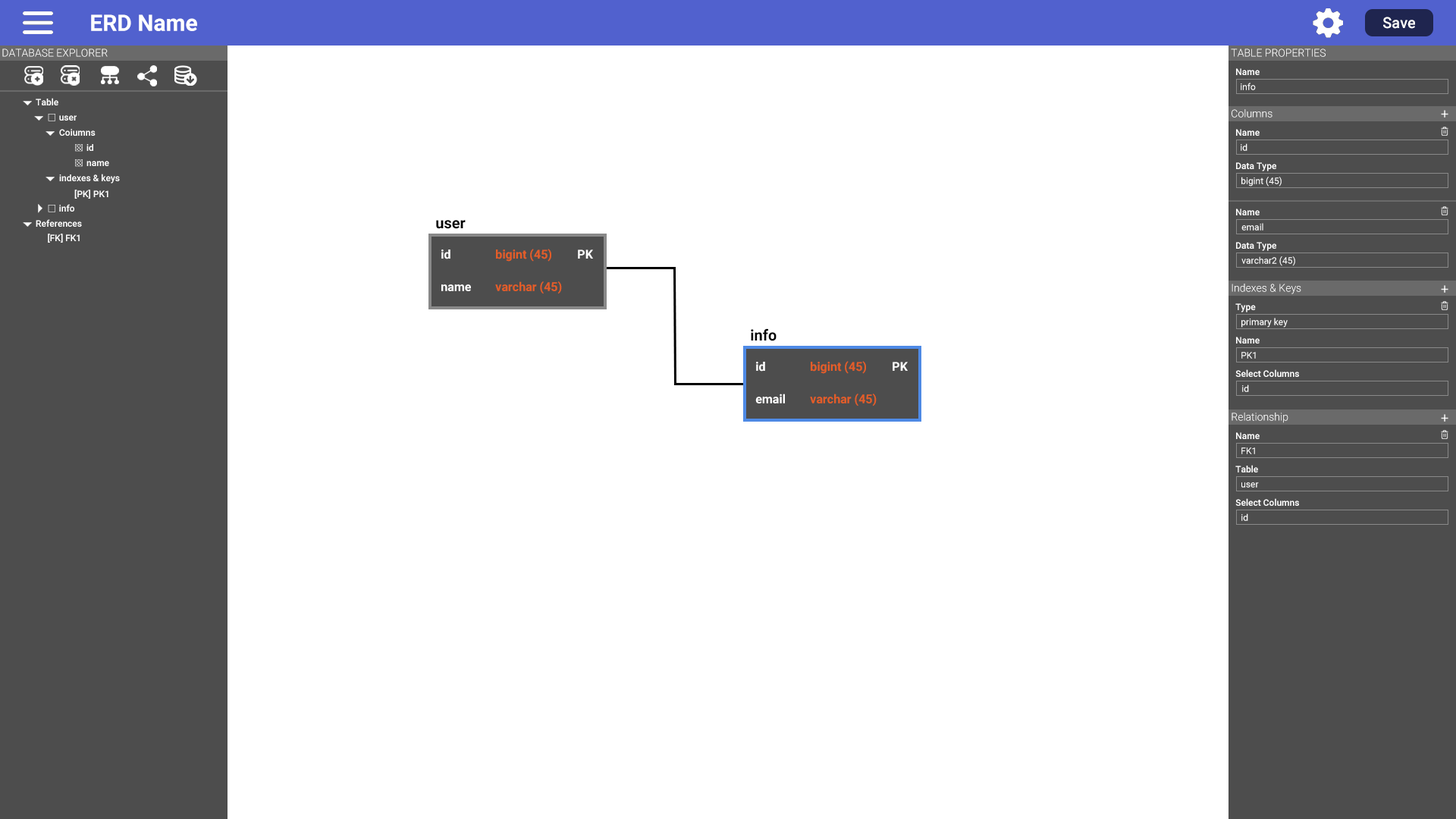
<style>
.page{position:relative;width:1456px;height:819px;background:#ffffff}
.page>*{position:absolute;margin:0}
.t1{font:22.7px "Roboto-Bold";color:#ffffff}
.t2{font:15.2px "Roboto-Medium";color:#ffffff}
.t3{font:10.6px "Roboto-Light";color:#ffffff}
.t4{font:9.1px "Roboto-Medium";color:#ffffff}
.t5{font:9.1px "Roboto-Regular";color:#ffffff}
.t6{font:9.1px "Gulim";color:#ffffff}
.t7{font:15.2px "Roboto-Bold";color:#000000}
.t8{font:12.1px "Roboto-Bold";color:#e45d27}
.t9{font:12.1px "Roboto-Bold";color:#ffffff}
</style>
<div class="page">
<p class="t1" style="left:91px;top:14px;width:106px;height:17px">ERD Name</p>
<p class="t2" style="left:1383px;top:17px;width:32px;height:12px">Save</p>
<p class="t3" style="left:2px;top:49px;width:106px;height:8px">DATABASE EXPLORER</p>
<p class="t3" style="left:1231px;top:49px;width:95px;height:8px">TABLE PROPERTIES</p>
<p class="t4" style="left:1236px;top:68px;width:24px;height:7px">Name</p>
<p class="t5" style="left:1241px;top:83px;width:15px;height:7px">info</p>
<p class="t4" style="left:36px;top:98px;width:22px;height:7px">Table</p>
<p class="t4" style="left:48px;top:114px;width:29px;height:7px"><span class="t6">□ </span>user</p>
<p class="t3" style="left:1232px;top:109px;width:40px;height:9px">Columns</p>
<p class="t4" style="left:59px;top:129px;width:37px;height:7px">Coiumns</p>
<p class="t4" style="left:1236px;top:129px;width:24px;height:7px">Name</p>
<p class="t4" style="left:75px;top:144px;width:18px;height:8px"><span class="t6">▩ </span>id</p>
<p class="t5" style="left:1241px;top:143px;width:6px;height:8px">id</p>
<p class="t4" style="left:75px;top:159px;width:34px;height:8px"><span class="t6">▩ </span>name</p>
<p class="t4" style="left:59px;top:174px;width:61px;height:10px">indexes &amp; keys</p>
<p class="t4" style="left:1236px;top:162px;width:40px;height:9px">Data Type</p>
<p class="t5" style="left:1241px;top:177px;width:41px;height:10px">bigint (45)</p>
<p class="t4" style="left:74px;top:190px;width:34px;height:9px">[PK] PK1</p>
<p class="t4" style="left:48px;top:204px;width:26px;height:8px"><span class="t6">□ </span>info</p>
<p class="t4" style="left:1236px;top:209px;width:24px;height:6px">Name</p>
<p class="t4" style="left:36px;top:219px;width:46px;height:8px">References</p>
<p class="t7" style="left:436px;top:220px;width:30px;height:9px">user</p>
<p class="t4" style="left:48px;top:234px;width:32px;height:9px">[FK] FK1</p>
<p class="t5" style="left:1241px;top:223px;width:22px;height:8px">email</p>
<p class="t4" style="left:1236px;top:242px;width:40px;height:9px">Data Type</p>
<p class="t8" style="left:441px;top:249px;width:152px;height:13px"><span class="t9">id  </span>bigint (45)<span class="t9"> PK</span></p>
<p class="t5" style="left:1241px;top:256px;width:54px;height:10px">varchar2 (45)</p>
<p class="t8" style="left:441px;top:281px;width:121px;height:13px"><span class="t9">name </span>varchar (45)</p>
<p class="t3" style="left:1232px;top:284px;width:69px;height:10px">Indexes &amp; Keys</p>
<p class="t4" style="left:1235px;top:303px;width:21px;height:9px">Type</p>
<p class="t5" style="left:1241px;top:318px;width:47px;height:10px">primary key</p>
<p class="t7" style="left:751px;top:328px;width:26px;height:13px">info</p>
<p class="t4" style="left:1236px;top:337px;width:24px;height:7px">Name</p>
<p class="t5" style="left:1241px;top:352px;width:15px;height:7px">PK1</p>
<p class="t8" style="left:756px;top:361px;width:152px;height:13px"><span class="t9">id  </span>bigint (45)<span class="t9"> PK</span></p>
<p class="t4" style="left:1235px;top:369px;width:64px;height:8px">Select Columns</p>
<p class="t5" style="left:1242px;top:384px;width:7px;height:8px">id</p>
<p class="t8" style="left:755px;top:394px;width:122px;height:12px"><span class="t9">email </span>varchar (45)</p>
<p class="t3" style="left:1232px;top:413px;width:56px;height:10px">Relationship</p>
<p class="t4" style="left:1236px;top:432px;width:24px;height:7px">Name</p>
<p class="t5" style="left:1241px;top:447px;width:14px;height:7px">FK1</p>
<p class="t4" style="left:1235px;top:465px;width:23px;height:7px">Table</p>
<p class="t5" style="left:1241px;top:482px;width:18px;height:6px">user</p>
<p class="t4" style="left:1235px;top:498px;width:64px;height:8px">Select Columns</p>
<p class="t5" style="left:1241px;top:513px;width:7px;height:8px">id</p>
</div>
